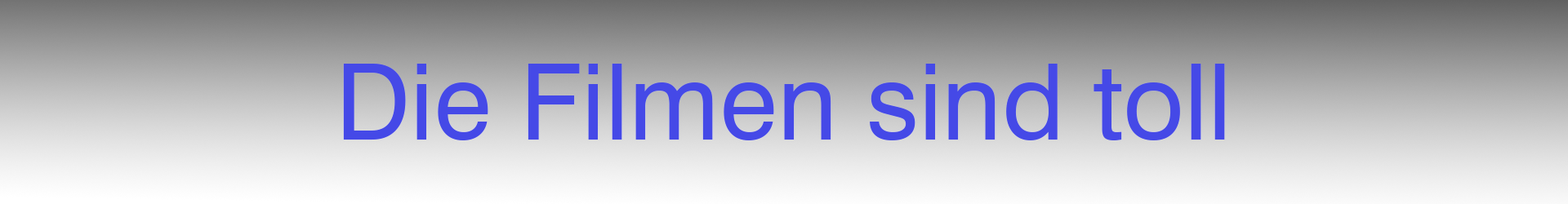
<style>
.page{position:relative;width:1568px;height:204px}
.page>*{position:absolute;margin:0}
.t1{font:105.5px "Swiss721BT-Roman";color:#4549e7}
</style>
<div class="page">
<p class="t1" style="left:343px;top:64px;width:882px;height:76px">Die Filmen sind toll</p>
</div>
